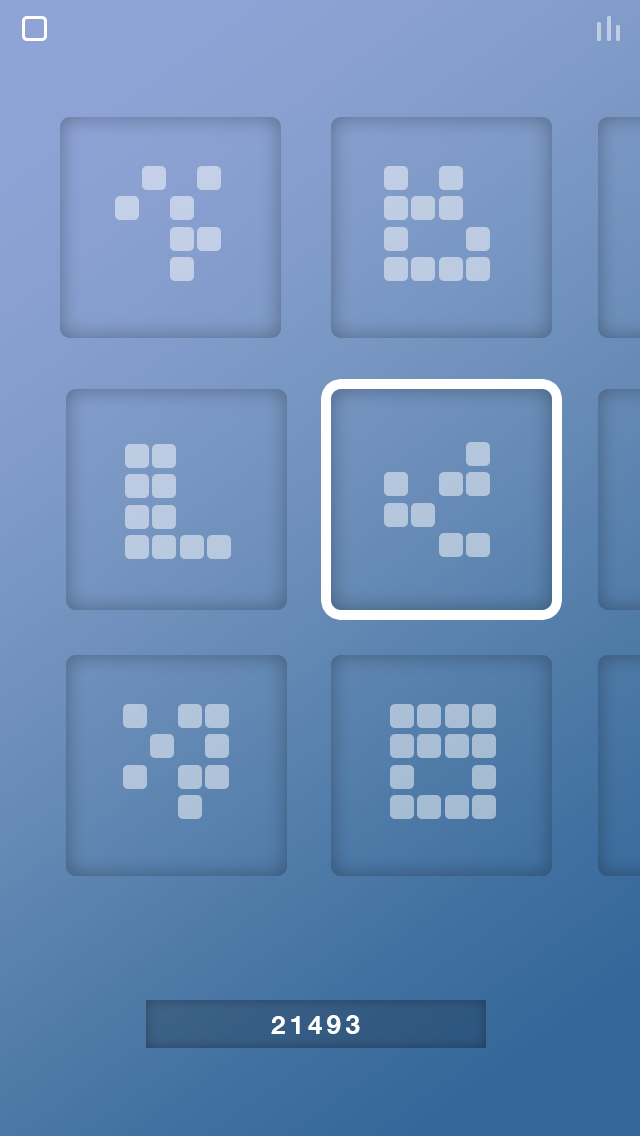
<style>
.page{position:relative;width:640px;height:1136px}
.page>*{position:absolute;margin:0}
.t1{font:26px "HelveticaNeue-Bold";letter-spacing:0.16em;color:#ffffff}
</style>
<div class="page">
<p class="t1" style="left:271px;top:1015px;width:89px;height:19px">21493</p>
</div>
